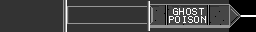
<style>
.page{position:relative;width:256px;height:32px;background:#333333}
.page>*{position:absolute;margin:0}
.t1{font:8px "Terminal";letter-spacing:0.05em;color:#ffffff}
</style>
<div class="page">
<p class="t1" style="left:169px;top:16px;width:37px;height:7px">POISON</p>
<p class="t1" style="left:173px;top:8px;width:31px;height:7px">GHOST</p>
</div>
